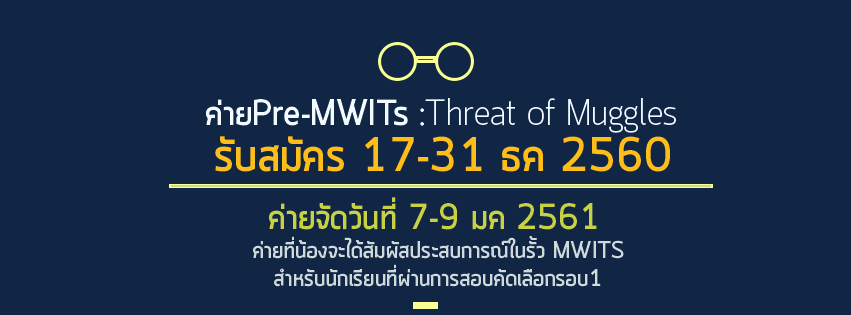
<style>
.page{position:relative;width:851px;height:315px;background:#112645}
.page>*{position:absolute;margin:0}
.t1{font:36px "Quark-Light";color:#f3fbfe}
.t2{font:36px "Quark-Bold";color:#f3fbfe}
.t3{font:48px "Quark-Bold";color:#ffbd17}
.t4{font:36px "Quark-Bold";color:#c7d041}
.t5{font:24px "Quark-Bold";color:#cfdad9}
</style>
<div class="page">
<p class="t1" style="left:206px;top:98px;width:470px;height:35px"><span class="t2">ค่ายPre-MWITs</span> :Threat of Muggles</p>
<p class="t3" style="left:215px;top:136px;width:455px;height:36px">รับสมัคร 17-31 ธค 2560</p>
<p class="t4" style="left:269px;top:197px;width:328px;height:33px">ค่ายจัดวันที่ 7-9 มค 2561</p>
<p class="t5" style="left:253px;top:236px;width:371px;height:51px;text-align:center">ค่ายที่น้องจะได้สัมผัสประสบการณ์ในรั้ว MWITSสำหรับนักเรียนที่ผ่านการสอบคัดเลือกรอบ1</p>
</div>
